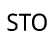
<style>
.page{position:relative;width:53px;height:41px;background:#ffffff}
.page>*{position:absolute;margin:0}
.t1{font:23.7px "DroidSans";color:#000000}
</style>
<div class="page">
<p class="t1" style="left:7px;top:13px;width:40px;height:18px">STO</p>
</div>
